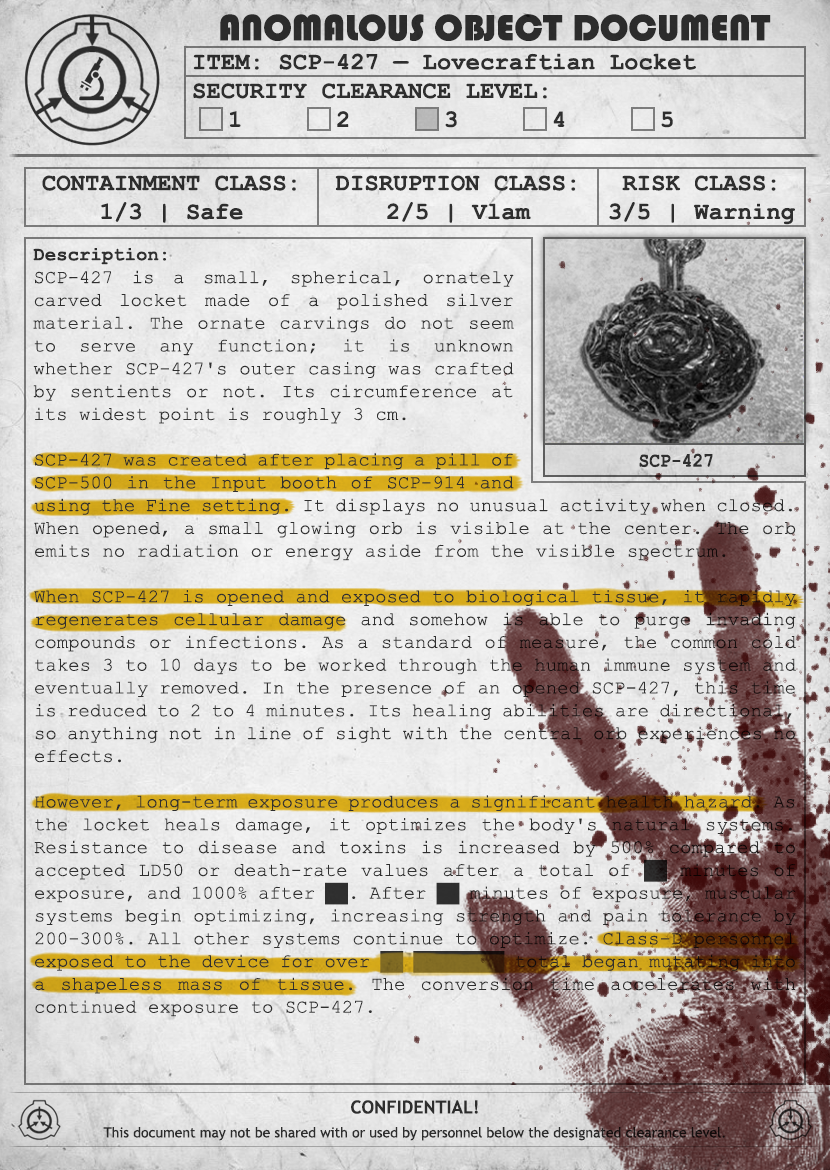
<style>
.page{position:relative;width:830px;height:1170px}
.page>*{position:absolute;margin:0}
.t1{font:38px "Bauhaus93";color:#333333;text-transform:uppercase}
.t2{font:24px "CourierNewPS-BoldMT";color:#333333}
.t3{font:24px "CourierNewPS-BoldMT";color:#333333;text-transform:uppercase}
.t4{font:19px "CourierNewPSMT";color:#333333}
.t5{font:19px "CourierNewPS-BoldMT";color:#333333}
.t6{font:20.1px "CourierNewPS-BoldMT";color:#333333;scale:0.9 1}
.t7{font:14px/24px "TrebuchetMS";color:#333333}
.t8{font:18px/24px "TrebuchetMS-Bold";color:#333333}
</style>
<div class="page">
<p class="t1" style="left:220px;top:14px;width:551px;height:27px">anomalous object document</p>
<p class="t2" style="left:193px;top:53px;width:503px;height:75px">ITEM: SCP-427 — Lovecraftian Locket<br><span class="t3">Security CLEARANCE LEVEL:</span> <br> 1   2   3   4   5</p>
<p class="t2" style="left:42px;top:175px;width:254px;height:48px;text-align:center">CONTAINMENT CLASS:<br>1/3 | Safe</p>
<p class="t2" style="left:335px;top:175px;width:241px;height:48px;text-align:center">DISRUPTION CLASS:<br>2/5 | Vlam</p>
<p class="t2" style="left:609px;top:175px;width:186px;height:50px;text-align:center">RISK CLASS:<br>3/5 | Warning</p>
<p class="t4" style="left:33px;top:248px;width:481px;height:244px;text-align:justify"><span class="t5">Description: <br></span>SCP-427 is a small, spherical, ornately carved locket made of a polished silver material. The ornate carvings do not seem to serve any function; it is unknown whether SCP-427's outer casing was crafted by sentients or not. Its circumference at its widest point is roughly 3 cm.<br><br>SCP-427 was created after placing a pill of SCP-500 in the Input booth of SCP-914 and using the Fine setting. It displays no unusual activity when closed. When opened, a small glowing orb is visible at the center. The orb emits no radiation or energy aside from the visible spectrum.</p>
<p class="t6" style="left:639px;top:453px;width:74px;height:15px">SCP-427</p>
<p class="t4" style="left:34px;top:498px;width:762px;height:519px;text-align:justify"><span class="t5"><br></span>using the Fine setting. It displays no unusual activity when closed. When opened, a small glowing orb is visible at the center. The orb emits no radiation or energy aside from the visible spectrum.<br><br>When SCP-427 is opened and exposed to biological tissue, it rapidly regenerates cellular damage and somehow is able to purge invading compounds or infections. As a standard of measure, the common cold takes 3 to 10 days to be worked through the human immune system and eventually removed. In the presence of an opened SCP-427, this time is reduced to 2 to 4 minutes. Its healing abilities are directional, so anything not in line of sight with the central orb experiences no effects.<br><br>However, long-term exposure produces a significant health hazard. As the locket heals damage, it optimizes the body's natural systems. Resistance to disease and toxins is increased by 500% compared to accepted LD50 or death-rate values after a total of ██ minutes of exposure, and 1000% after ██. After ██ minutes of exposure, muscular systems begin optimizing, increasing strength and pain tolerance by 200-300%. All other systems continue to optimize. Class-D personnel exposed to the device for over ██ ████████ total began mutating into a shapeless mass of tissue. The conversion time accelerates with continued exposure to SCP-427.</p>
<p class="t7" style="left:103px;top:1100px;width:622px;height:41px;text-align:center"><span class="t8">CONFIDENTIAL!<br></span>This document may not be shared with or used by personnel below the designated clearance level.</p>
</div>
